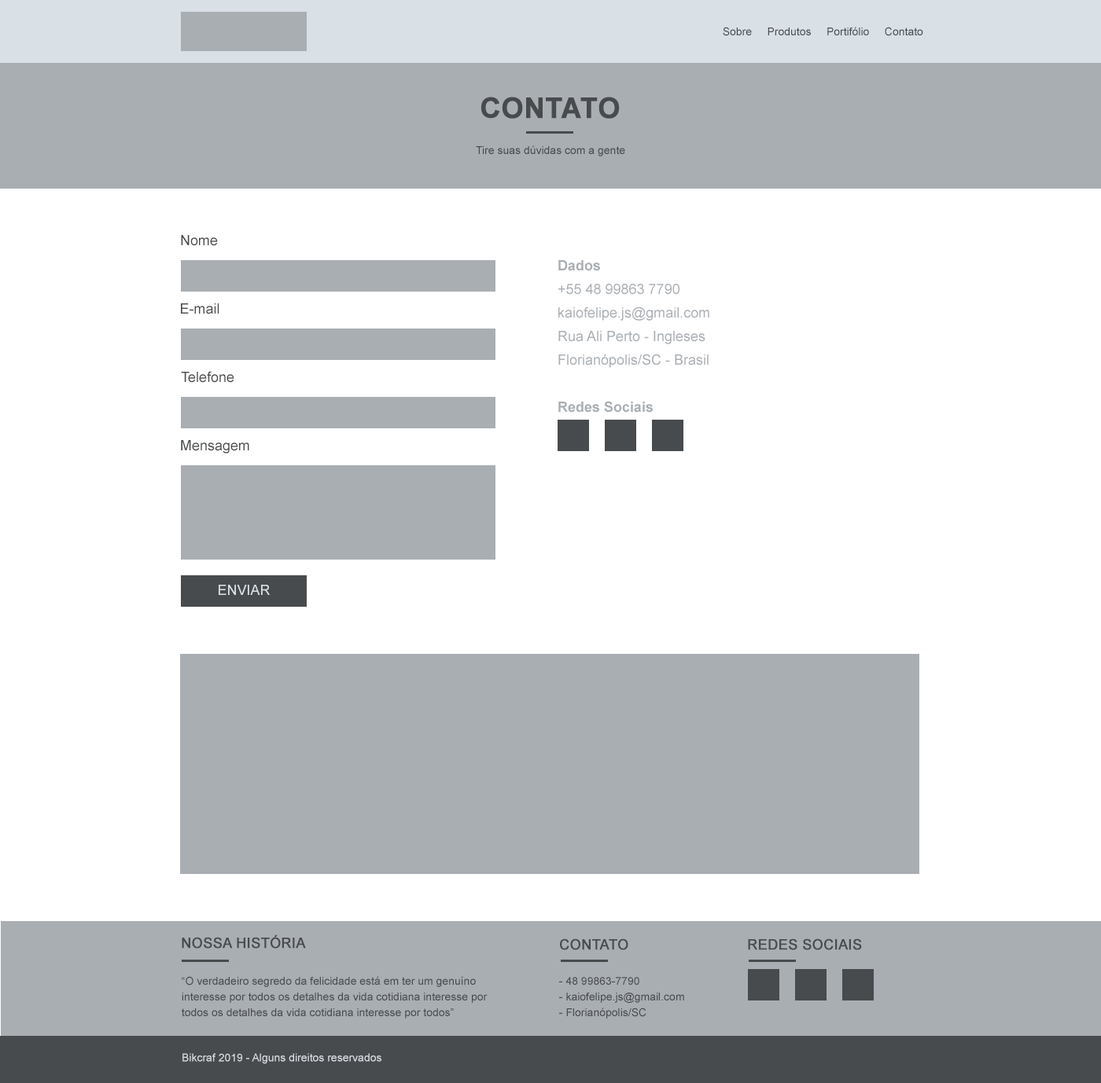
<style>
.page{position:relative;width:1101px;height:1083px;background:#ffffff}
.page>*{position:absolute;margin:0}
.t1{font:11px "ArialMT";color:#484b4d}
.t2{font:28.3px "Arial-BoldMT";color:#484b4d;text-transform:uppercase;font-weight:bold}
.t3{font:14.2px "ArialMT";color:#484b4d}
.t4{font:14.2px/23.6px "ArialMT";color:#a9aeb3}
.t5{font:14.2px/23.6px "Arial-BoldMT";color:#a9aeb3}
.t6{font:14.2px "ArialMT";color:#d9e0e6;text-transform:uppercase}
.t7{font:14.2px "ArialMT";color:#484b4d;text-transform:uppercase;font-weight:bold}
.t8{font:11px/15.7px "ArialMT";color:#484b4d}
.t9{font:11px "ArialMT";color:#d9e0e6}
</style>
<div class="page">
<p class="t1" style="left:723px;top:27px;width:200px;height:9px">Sobre     Produtos     Portifólio     Contato</p>
<p class="t2" style="left:480px;top:97px;width:140px;height:22px">CONTATO</p>
<p class="t1" style="left:476px;top:145px;width:149px;height:11px">Tire suas dúvidas com a gente</p>
<p class="t3" style="left:181px;top:235px;width:37px;height:11px">Nome</p>
<p class="t4" style="left:558px;top:260px;width:151px;height:153px"><span class="t5">Dados<br></span>+55 48 99863 7790<br>kaiofelipe.js@gmail.com<br>Rua Ali Perto - Ingleses<br>Florianópolis/SC - Brasil<br><br><span class="t5">Redes Sociais</span></p>
<p class="t3" style="left:181px;top:303px;width:38px;height:11px">E-mail</p>
<p class="t3" style="left:181px;top:371px;width:53px;height:12px">Telefone</p>
<p class="t3" style="left:181px;top:440px;width:68px;height:14px">Mensagem</p>
<p class="t6" style="left:219px;top:585px;width:51px;height:10px">Enviar</p>
<p class="t7" style="left:182px;top:935px;width:124px;height:14px">Nossa História</p>
<p class="t7" style="left:560px;top:939px;width:68px;height:12px">CONTATO</p>
<p class="t7" style="left:748px;top:939px;width:114px;height:12px">REDES SOCIAIS</p>
<p class="t8" style="left:182px;top:976px;width:305px;height:43px">“O verdadeiro segredo da felicidade está em ter um genuíno interesse por todos os detalhes da vida cotidiana interesse por todos os detalhes da vida cotidiana interesse por todos”</p>
<p class="t8" style="left:559px;top:977px;width:125px;height:42px">- 48 99863-7790<br>- kaiofelipe.js@gmail.com<br>- Florianópolis/SC</p>
<p class="t9" style="left:182px;top:1053px;width:199px;height:12px">Bikcraf 2019 - Alguns direitos reservados</p>
</div>
